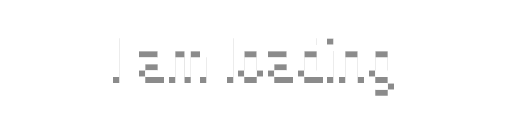
<style>
.page{position:relative;width:512px;height:128px;background:#ffffff}
.page>*{position:absolute;margin:0}
.t1{font:57.7px "Peepo";letter-spacing:-0.015em}
</style>
<div class="page">
<p class="t1" style="left:113px;top:38px;width:281px;height:58px">I am loading</p>
</div>
